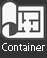
<style>
.page{position:relative;width:47px;height:58px;background:#333333}
.page>*{position:absolute;margin:0}
.t1{font:10.7px "MyriadPro-Regular";color:#ffffff}
</style>
<div class="page">
<p class="t1" style="left:2px;top:43px;width:43px;height:8px">Container</p>
</div>
